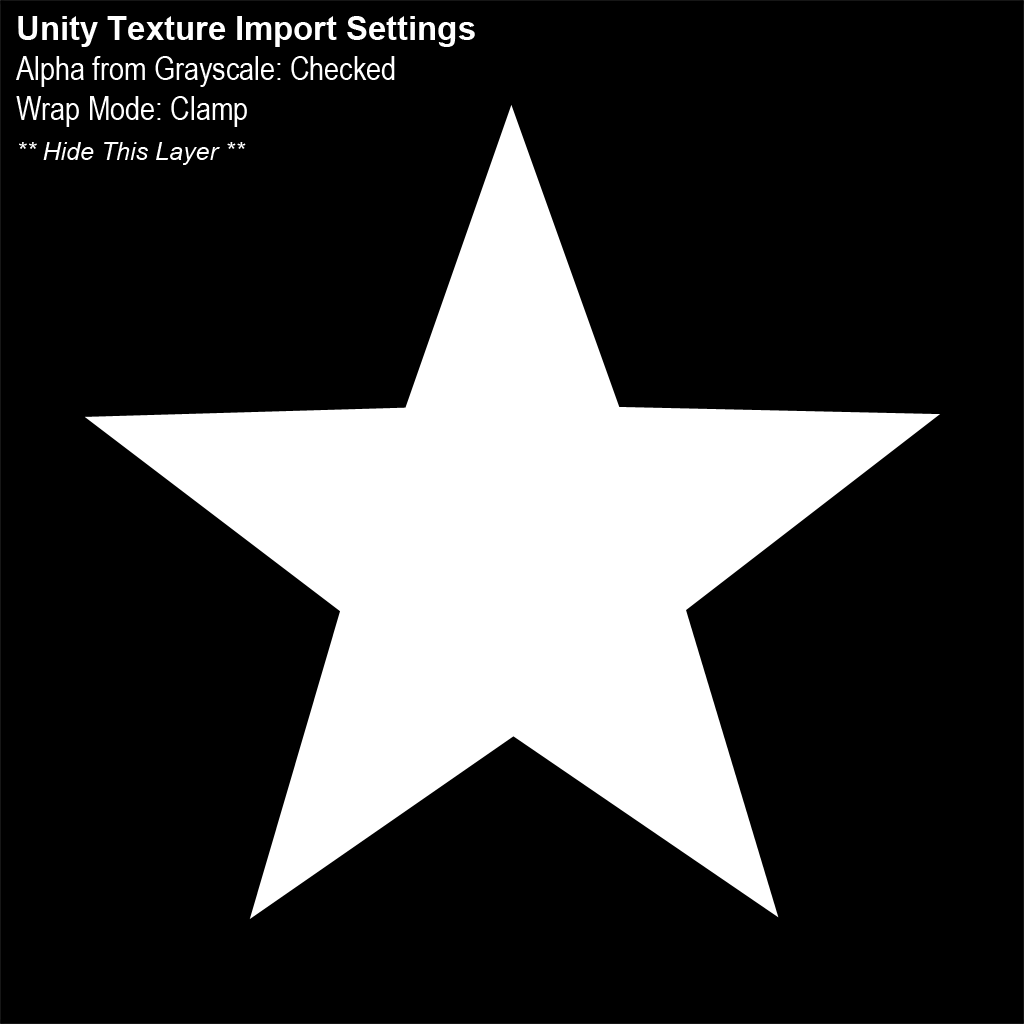
<style>
.page{position:relative;width:1024px;height:1024px;background:#000000}
.page>*{position:absolute;margin:0}
.t1{font:32.8px/40px "ArialNarrow";color:#ffffff}
.t2{font:32.8px/40px "Arial-BoldMT";color:#ffffff}
.t3{font:25px/40px "Arial-ItalicMT";color:#ffffff}
</style>
<div class="page">
<p class="t1" style="left:16px;top:16px;width:459px;height:149px"><span class="t2">Unity Texture Import Settings<br></span>Alpha from Grayscale: Checked<br>Wrap Mode: Clamp<br><span class="t3">** Hide This Layer **</span></p>
</div>
